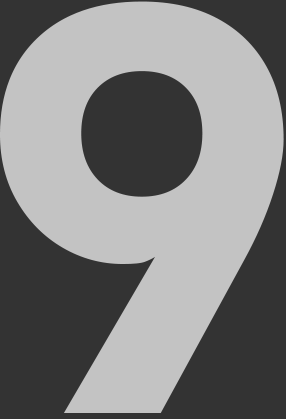
<style>
.page{position:relative;width:286px;height:419px;background:#c3c3c3}
.page>*{position:absolute;margin:0}
.t1{font:555.6px "JetBrainsMono-ExtraBold";letter-spacing:0.72em;color:#c3c3c3}
</style>
<div class="page">
<p class="t1" style="left:0px;top:1px;width:284px;height:412px">9</p>
</div>
